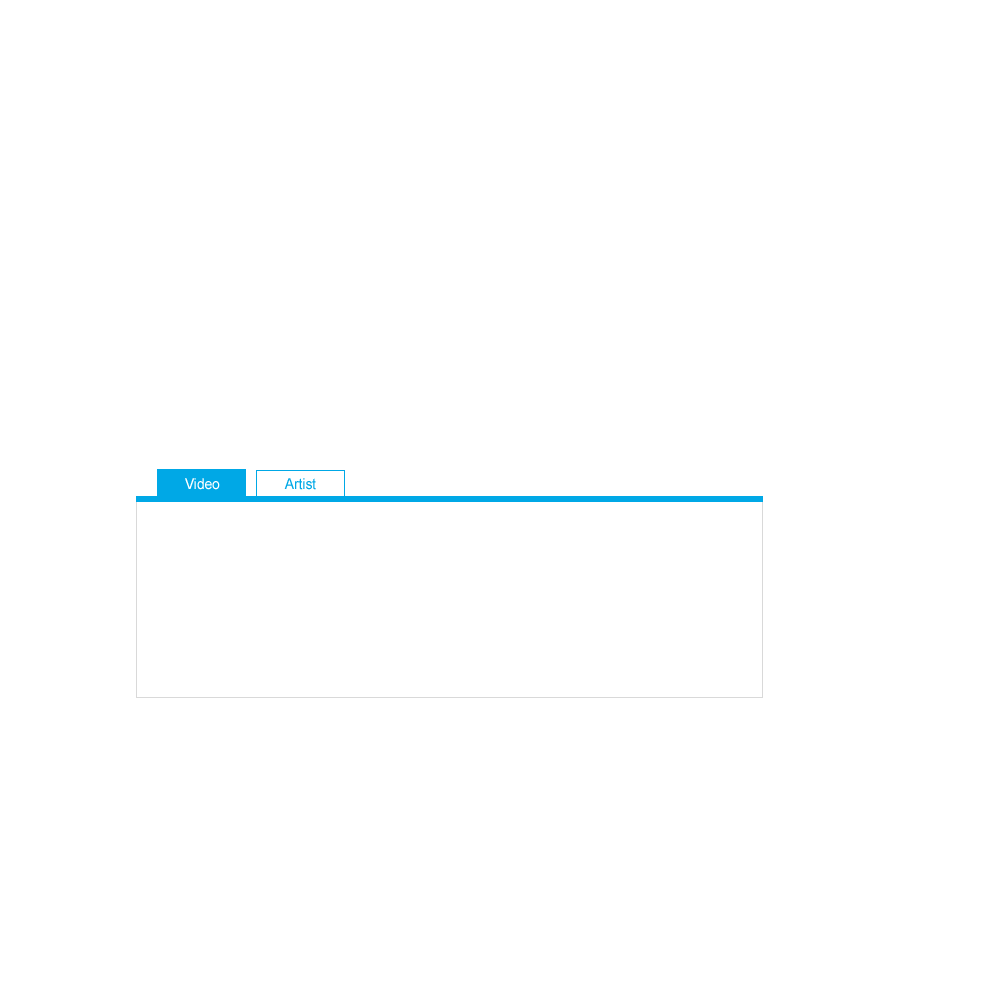
<style>
.page{position:relative;width:1000px;height:1000px;background:#ffffff}
.page>*{position:absolute;margin:0}
.t1{font:15px "ArialMT";color:#ffffff;scale:0.91 1}
.t2{font:15px "ArialMT";color:#00a8e6;scale:0.91 1}
</style>
<div class="page">
<p class="t1" style="left:185px;top:478px;width:35px;height:12px">Video</p>
<p class="t2" style="left:284px;top:478px;width:32px;height:12px">Artist</p>
</div>
